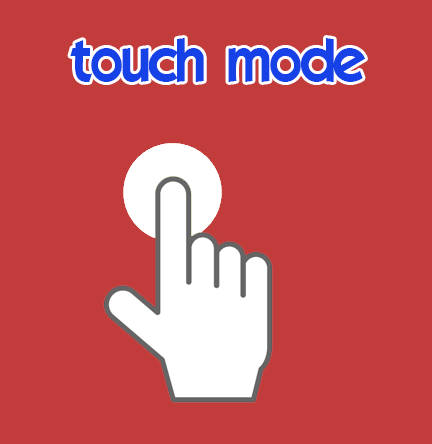
<style>
.page{position:relative;width:432px;height:444px;background:#c23c3c}
.page>*{position:absolute;margin:0}
.t1{font:60px "ELEGANCE";color:#1541e7}
</style>
<div class="page">
<p class="t1" style="left:70px;top:38px;width:295px;height:44px">touch mode</p>
</div>
